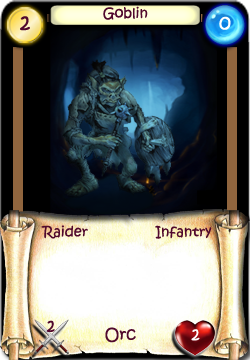
<style>
.page{position:relative;width:250px;height:360px}
.page>*{position:absolute;margin:0}
.t1{font:14px "KristenITC-Regular";color:#51092d}
.t2{font:20px "KristenITC-Regular";color:#51092d}
.t3{font:20px "KristenITC-Regular";color:#ffffff}
.t4{font:16px "KristenITC-Regular";color:#51092d}
.t5{font:16px "KristenITC-Regular";color:#fefefe}
</style>
<div class="page">
<p class="t1" style="left:103px;top:6px;width:45px;height:14px">Goblin</p>
<p class="t2" style="left:20px;top:16px;width:10px;height:15px">2</p>
<p class="t3" style="left:219px;top:16px;width:12px;height:14px">0</p>
<p class="t1" style="left:41px;top:225px;width:47px;height:14px">Raider</p>
<p class="t1" style="left:155px;top:225px;width:57px;height:14px">Infantry</p>
<p class="t4" style="left:46px;top:320px;width:9px;height:12px">2</p>
<p class="t4" style="left:105px;top:327px;width:31px;height:16px">Orc</p>
<p class="t5" style="left:191px;top:329px;width:9px;height:12px">2</p>
</div>
